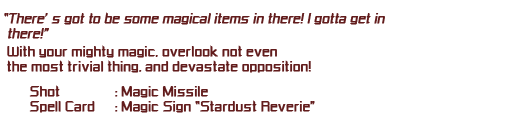
<style>
.page{position:relative;width:512px;height:128px;background:#ffffff}
.page>*{position:absolute;margin:0}
.t1{font:11px/15px "RussellSquare";color:#621c1c;font-weight:bold;font-style:italic}
.t2{font:11px/18px "RussellSquare";color:#621c1c;font-weight:bold;font-style:italic}
.t3{font:11px/15px "RussellSquare";color:#621c1c;font-weight:bold}
.t4{font:11px/25px "RussellSquare";color:#621c1c;font-weight:bold}
</style>
<div class="page">
<p class="t1" style="left:4px;top:12px;width:381px;height:101px">“There’s got to be some magical items in there! I gotta get in there!<span class="t2">”<br></span><span class="t3">With your mighty magic, overlook not even<br>the </span><span class="t4">most trivial thing, and devastate opposition!<br>　　</span><span class="t3">Shot  : Magic Missile<br>　　Spell Card : Magic Sign “Stardust Reverie”</span></p>
</div>
